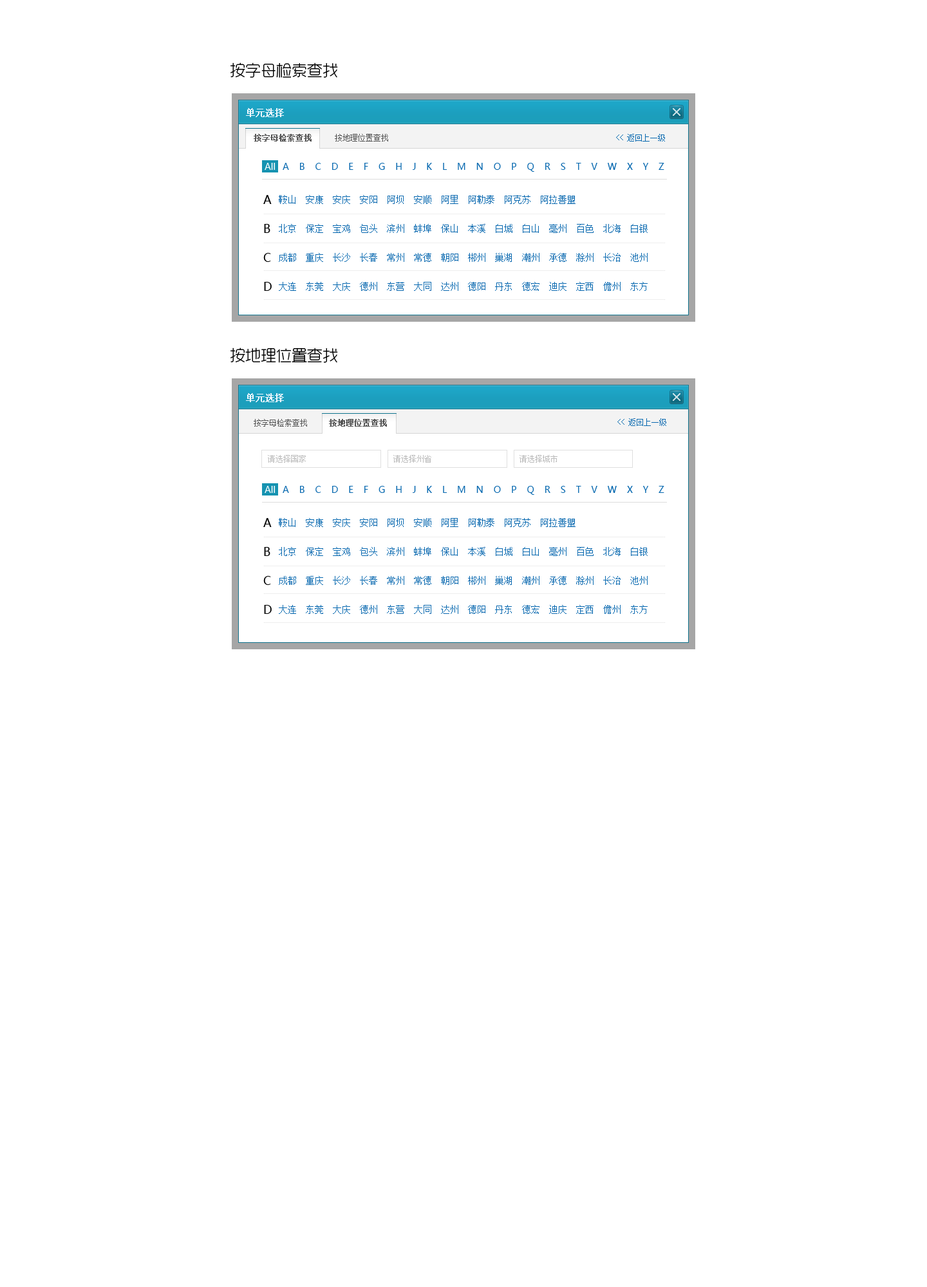
<style>
.page{position:relative;width:927px;height:1287px;background:#ffffff}
.page>*{position:absolute;margin:0}
.t1{font:15.4px "RTWSYueGoTrial-Light";color:#000000}
.t2{font:9px "SimSun";color:#eef7fe;font-weight:bold}
.t3{font:7.7px "SimSun";color:#555555;font-weight:bold}
.t4{font:7.7px "SimSun";color:#555555}
.t5{font:7.7px "SimSun";color:#0869b0}
.t6{font:9px "MicrosoftYaHei";letter-spacing:0.18em;color:#0869b0}
.t7{font:9px "MicrosoftYaHei";color:#ffffff}
.t8{font:11.6px "MicrosoftYaHei";color:#000000}
.t9{font:9px "SimSun";color:#0869b0}
.t10{font:7.7px "SimSun";color:#bbbbbb}
</style>
<div class="page">
<p class="t1" style="left:230px;top:62px;width:108px;height:16px">按字母检索查找</p>
<p class="t2" style="left:246px;top:108px;width:38px;height:9px">单元选择</p>
<p class="t3" style="left:254px;top:134px;width:134px;height:8px">按字母检索查找     <span class="t4">按地理位置查找</span></p>
<p class="t5" style="left:616px;top:134px;width:49px;height:8px">&lt;&lt; 返回上一级</p>
<p class="t6" style="left:264px;top:163px;width:400px;height:9px"><span class="t7">All  </span>A  B  C  D  E  F  G  H  J  K  L  M  N  O  P  Q  R  S  T  V  W  X  Y  Z</p>
<p class="t8" style="left:263px;top:195px;width:9px;height:9px">A</p>
<p class="t9" style="left:279px;top:195px;width:296px;height:9px">鞍山  安康  安庆  安阳  阿坝  安顺  阿里  阿勒泰  阿克苏  阿拉善盟</p>
<p class="t8" style="left:264px;top:224px;width:6px;height:9px">B</p>
<p class="t9" style="left:279px;top:224px;width:368px;height:9px">北京  保定  宝鸡  包头  滨州  蚌埠  保山  本溪  白城  白山  亳州  百色  北海  白银</p>
<p class="t8" style="left:263px;top:253px;width:8px;height:9px">C</p>
<p class="t9" style="left:279px;top:253px;width:368px;height:9px">成都  重庆  长沙  长春  常州  常德  朝阳  郴州  巢湖  潮州  承德  滁州  长治  池州</p>
<p class="t8" style="left:264px;top:282px;width:8px;height:9px">D</p>
<p class="t9" style="left:279px;top:282px;width:368px;height:9px">大连  东莞  大庆  德州  东营  大同  达州  德阳  丹东  德宏  迪庆  定西  儋州  东方</p>
<p class="t1" style="left:230px;top:347px;width:108px;height:16px">按地理位置查找</p>
<p class="t2" style="left:246px;top:393px;width:38px;height:9px">单元选择</p>
<p class="t4" style="left:254px;top:419px;width:133px;height:8px">按字母检索查找  <span class="t3">   按地理位置查找</span></p>
<p class="t5" style="left:617px;top:418px;width:49px;height:8px">&lt;&lt; 返回上一级</p>
<p class="t10" style="left:268px;top:455px;width:38px;height:8px">请选择国家</p>
<p class="t10" style="left:393px;top:455px;width:38px;height:8px">请选择州省</p>
<p class="t10" style="left:519px;top:455px;width:38px;height:8px">请选择城市</p>
<p class="t6" style="left:264px;top:486px;width:400px;height:9px"><span class="t7">All  </span>A  B  C  D  E  F  G  H  J  K  L  M  N  O  P  Q  R  S  T  V  W  X  Y  Z</p>
<p class="t8" style="left:263px;top:518px;width:9px;height:9px">A</p>
<p class="t9" style="left:279px;top:518px;width:296px;height:9px">鞍山  安康  安庆  安阳  阿坝  安顺  阿里  阿勒泰  阿克苏  阿拉善盟</p>
<p class="t8" style="left:264px;top:547px;width:6px;height:9px">B</p>
<p class="t9" style="left:279px;top:547px;width:368px;height:9px">北京  保定  宝鸡  包头  滨州  蚌埠  保山  本溪  白城  白山  亳州  百色  北海  白银</p>
<p class="t8" style="left:263px;top:576px;width:8px;height:9px">C</p>
<p class="t9" style="left:279px;top:576px;width:368px;height:9px">成都  重庆  长沙  长春  常州  常德  朝阳  郴州  巢湖  潮州  承德  滁州  长治  池州</p>
<p class="t8" style="left:264px;top:605px;width:8px;height:9px">D</p>
<p class="t9" style="left:279px;top:605px;width:368px;height:9px">大连  东莞  大庆  德州  东营  大同  达州  德阳  丹东  德宏  迪庆  定西  儋州  东方</p>
</div>
